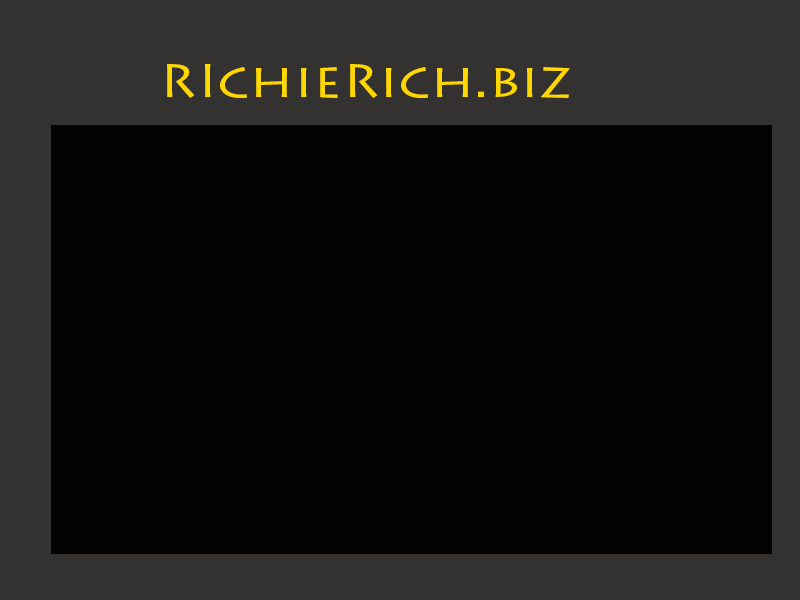
<style>
.page{position:relative;width:800px;height:600px;background:#030202}
.page>*{position:absolute;margin:0}
.t1{font:48px "LithosPro-Regular";color:#ffd700;scale:1.13 1}
</style>
<div class="page">
<p class="t1" style="left:167px;top:64px;width:403px;height:34px">RIchieRich.biz</p>
</div>
